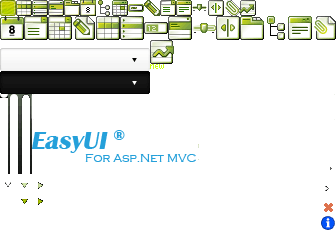
<style>
.page{position:relative;width:336px;height:231px;background:#ffffff}
.page>*{position:absolute;margin:0}
.t1{font:26px "BritannicBold";color:#25a0da;font-style:italic}
.t2{font:26px "BritannicBold";color:#25a0da}
.t3{font:12px "CopperplateGothic-Light";color:#25a0da}
</style>
<div class="page">
<p class="t1" style="left:32px;top:130px;width:93px;height:23px">EasyUI <span class="t2">®</span></p>
<p class="t3" style="left:85px;top:154px;width:111px;height:8px">For Asp.Net MVC</p>
</div>
